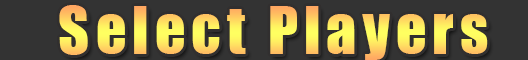
<style>
.page{position:relative;width:528px;height:60px;background:#333333}
.page>*{position:absolute;margin:0}
.t1{font:61.2px "Impact";letter-spacing:0.1em}
</style>
<div class="page">
<p class="t1" style="left:59px;top:5px;width:429px;height:55px">Select Players</p>
</div>
